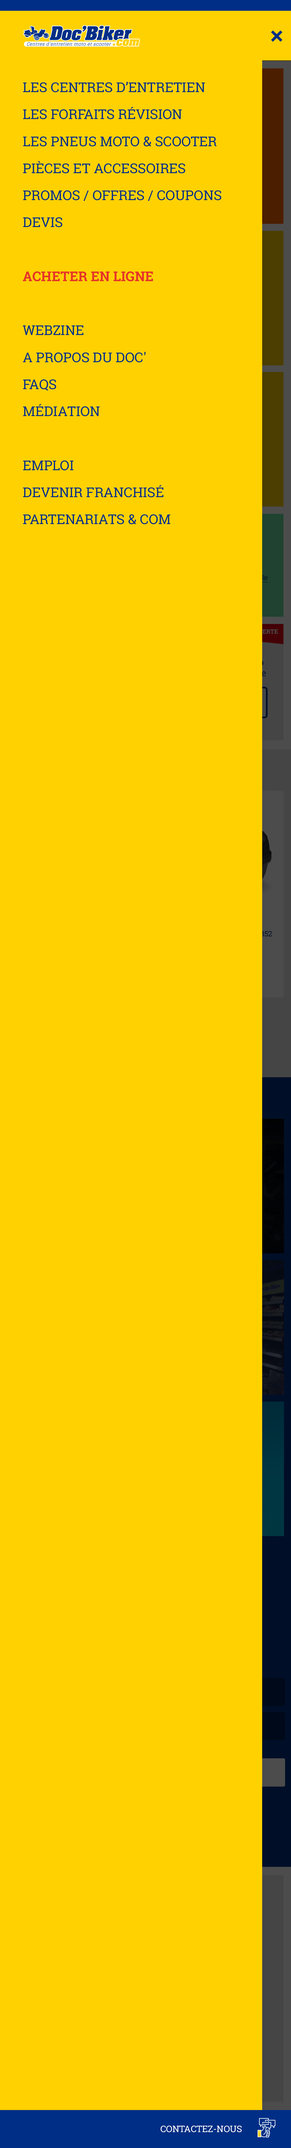
<style>
.page{position:relative;width:291px;height:2148px;background:#ffd100}
.page>*{position:absolute;margin:0}
.t1{font:13.5px/27px "RobotoSlab-Regular";color:#002e86;text-transform:uppercase}
.t2{font:13.5px/27px "RobotoSlab-Bold";color:#e6332a;text-transform:uppercase}
.t3{font:6px "RobotoSlab-Bold";color:#ffd100;text-transform:uppercase}
.t4{font:9px "RobotoSlab-Regular";color:#ffffff;text-transform:uppercase}
</style>
<div class="page">
<p class="t1" style="left:23px;top:82px;width:198px;height:442px">LES CENTRES D’ENTRETIEN<br>LES FORFAITS RÉVISION<br>LES PNEUS MOTO &amp; SCOOTER<br>Pièces et accessoires <br>PROMOS / OFFRES / coupons<br>DEVIS<br><br><span class="t2">acheter en ligne<br><br></span>webzine<br>A PROPOS DU DOC'<br>FAQS<br>MÉDIATION<br><br>EMPLOI<br>DEVENIR FRANCHISÉ<br>PartenaRIATS &amp; com</p>
<p class="t3" style="left:217px;top:628px;width:61px;height:6px">Offre découverte</p>
<p class="t4" style="left:161px;top:2126px;width:81px;height:7px">contactez-nous</p>
</div>
